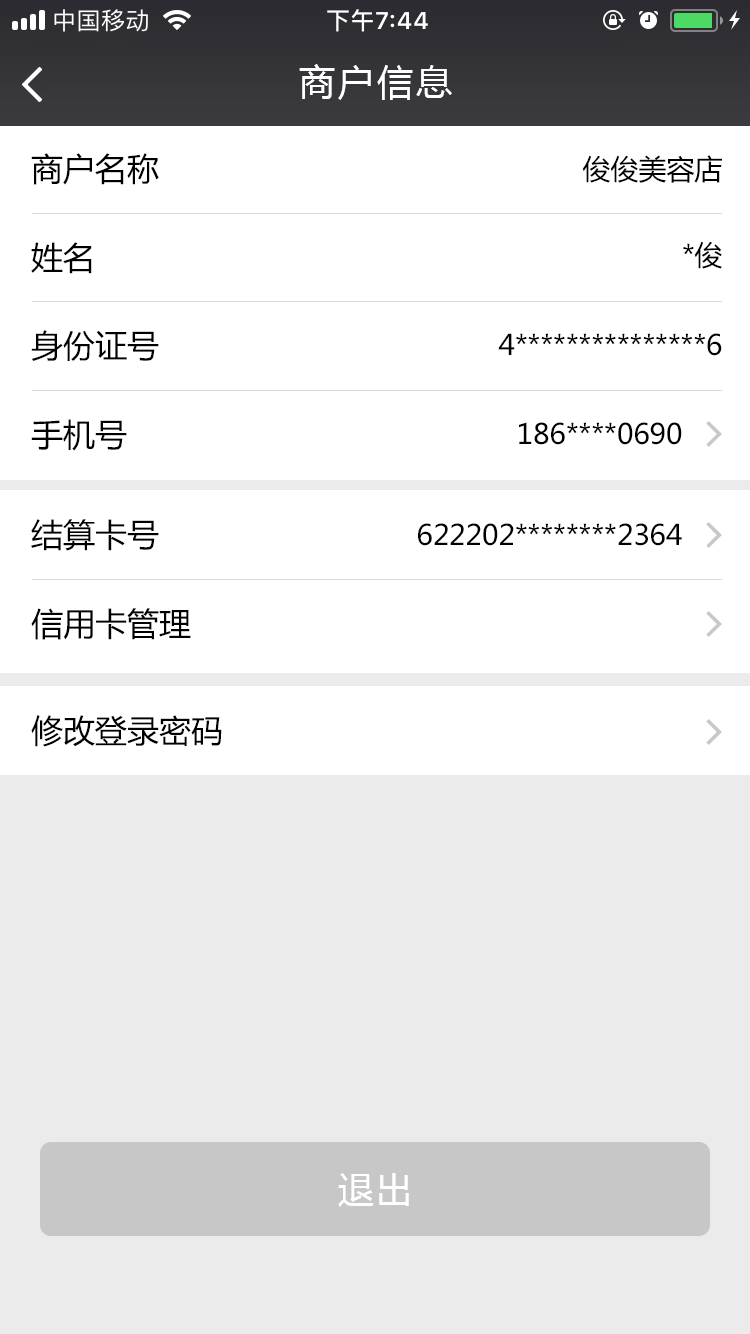
<style>
.page{position:relative;width:750px;height:1334px;background:#ffffff}
.page>*{position:absolute;margin:0}
.t1{font:36px "MicrosoftYaHei";letter-spacing:0.08em;color:#ffffff}
.t2{font:32px "MicrosoftYaHei";color:#000000}
.t3{font:28px "MicrosoftYaHei";color:#000000}
</style>
<div class="page">
<p class="t1" style="left:299px;top:64px;width:153px;height:36px">商户信息</p>
<p class="t2" style="left:31px;top:153px;width:128px;height:32px">商户名称</p>
<p class="t3" style="left:582px;top:155px;width:140px;height:28px">俊俊美容店</p>
<p class="t2" style="left:31px;top:242px;width:61px;height:32px">姓名</p>
<p class="t3" style="left:683px;top:241px;width:39px;height:28px">*俊</p>
<p class="t2" style="left:31px;top:330px;width:128px;height:31px">身份证号</p>
<p class="t3" style="left:498px;top:333px;width:224px;height:23px">4***************6</p>
<p class="t2" style="left:31px;top:419px;width:96px;height:32px">手机号</p>
<p class="t3" style="left:519px;top:422px;width:163px;height:23px">186****0690</p>
<p class="t2" style="left:31px;top:519px;width:128px;height:32px">结算卡号</p>
<p class="t3" style="left:418px;top:523px;width:264px;height:23px">622202********2364</p>
<p class="t2" style="left:31px;top:608px;width:160px;height:32px">信用卡管理</p>
<p class="t2" style="left:31px;top:715px;width:191px;height:32px">修改登录密码</p>
<p class="t1" style="left:338px;top:1173px;width:71px;height:34px">退出</p>
</div>
